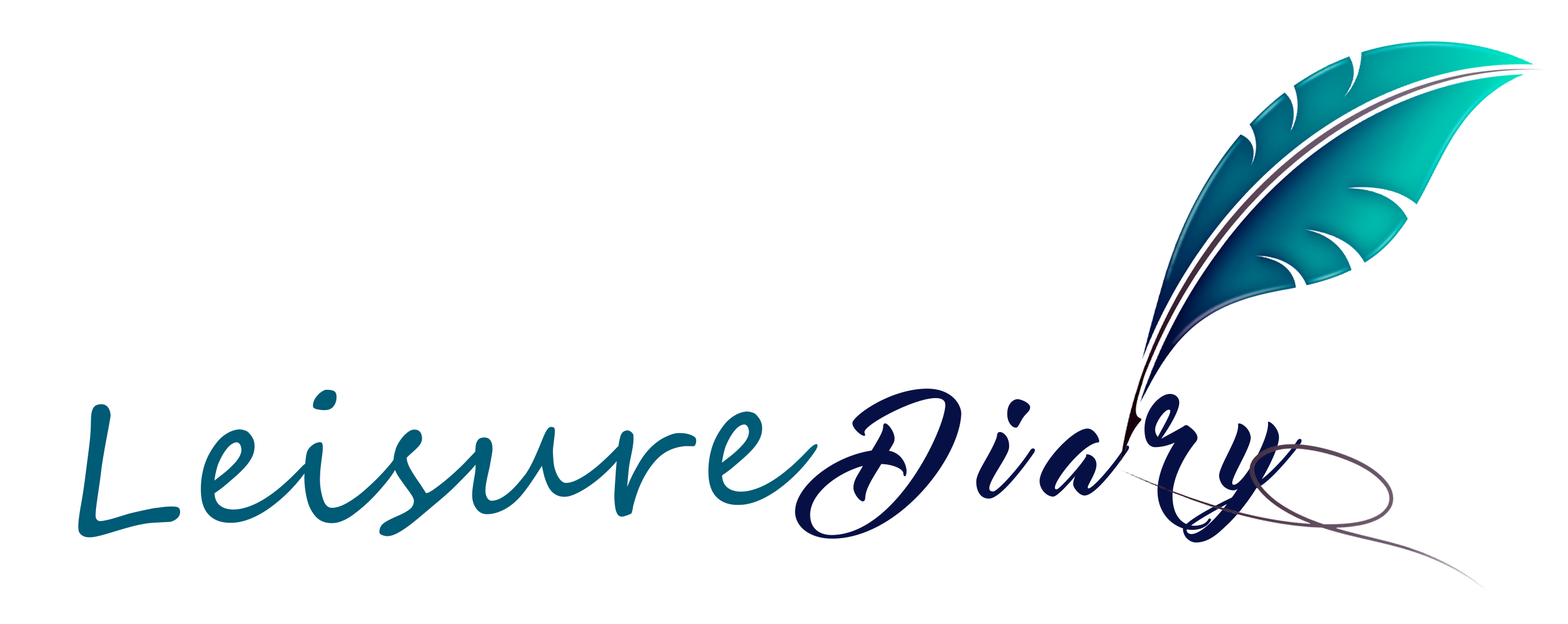
<style>
.page{position:relative;width:1568px;height:624px;background:#ffffff}
.page>*{position:absolute;margin:0}
.t1{font:133.9px "MasterOfBreak";letter-spacing:0.2em;color:#071044;scale:1.04 1}
.t2{font:133.9px "EnclaveDemoRegular";letter-spacing:0.2em;color:#071044;scale:1.04 1}
.t3{font:175.3px "SegoeScript";letter-spacing:0.02em;color:#005b76;scale:1.04 1}
</style>
<div class="page">
<p class="t1" style="left:795px;top:389px;width:507px;height:154px;rotate:-2deg"><span class="t2"> </span>Diary</p>
<p class="t3" style="left:78px;top:390px;width:740px;height:148px;rotate:-2deg">Leisure</p>
</div>
